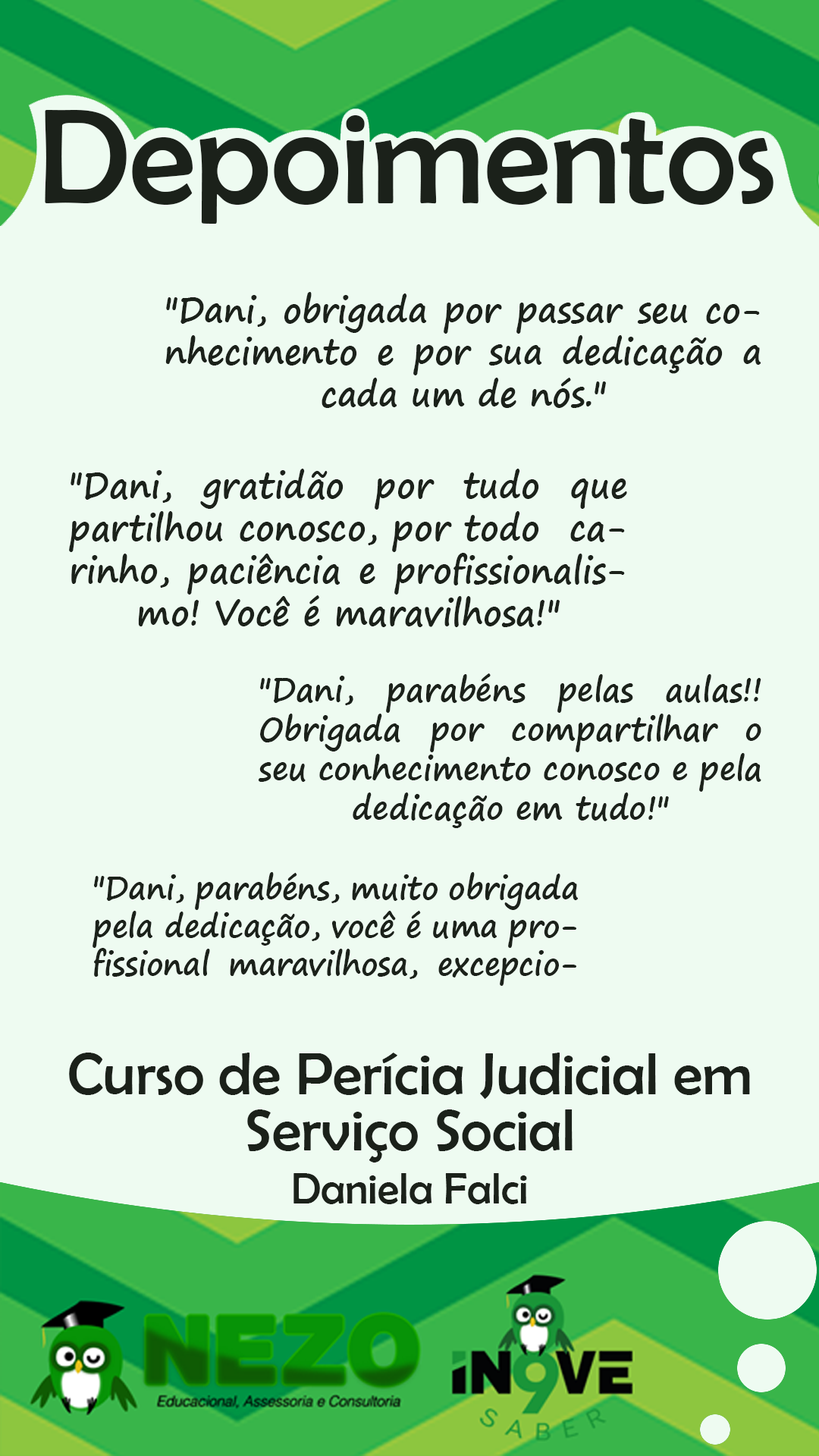
<style>
.page{position:relative;width:819px;height:1456px;background:#eefbf1}
.page>*{position:absolute;margin:0}
.t1{font:35.1px "SegoePrint-Bold";color:#1b211a;scale:0.95 1}
.t2{font:35.5px "SegoePrint-Bold";color:#1b211a;scale:0.95 1}
.t3{font:32.8px "SegoePrint-Bold";color:#1b211a;scale:0.95 1}
.t4{font:31.7px "SegoePrint-Bold";color:#1b211a;scale:0.95 1}
.t5{font:59.7px/56.4px "BerlinSansFB-Reg";color:#1b211a}
.t6{font:43.7px "BerlinSansFB-Reg";color:#1b211a}
</style>
<div class="page">
<p class="t1" style="left:165px;top:292px;width:596px;height:116px;text-align:justify">"Dani, obrigada por passar seu conhecimento e por sua dedicação a cada um de nós."</p>
<p class="t2" style="left:69px;top:469px;width:558px;height:158px;text-align:justify">"Dani, gratidão por tudo que partilhou conosco, por todo  carinho, paciência e profissionalismo! Você é maravilhosa!"</p>
<p class="t3" style="left:258px;top:673px;width:503px;height:155px;text-align:justify">"Dani, parabéns pelas aulas!! Obrigada por compartilhar o seu conhecimento conosco e pela dedicação em tudo!"</p>
<p class="t4" style="left:93px;top:872px;width:485px;height:114px;text-align:justify">"Dani, parabéns, muito obrigada pela dedicação, você é uma profissional maravilhosa, excepcional! Dá pra ver que você realmente ama o que faz, professora, é admirável!"</p>
<p class="t5" style="left:69px;top:1053px;width:681px;height:151px;text-align:center">Curso de Perícia Judicial em Serviço Social<br><span class="t6">Daniela Falci</span></p>
</div>
